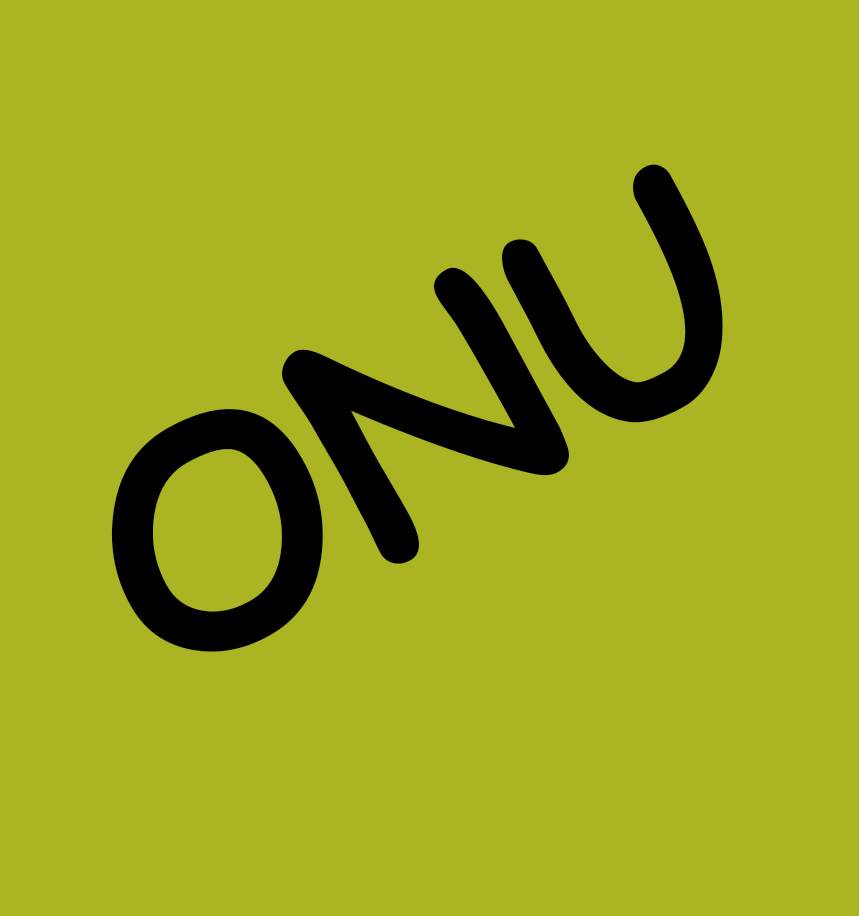
<style>
.page{position:relative;width:859px;height:916px;background:#abb423}
.page>*{position:absolute;margin:0}
.t1{font:300px "ComicSansMS-Bold";color:#000000;font-variant:small-caps}
</style>
<div class="page">
<p class="t1" style="left:111px;top:164px;width:612px;height:488px;rotate:-29deg">ONU</p>
</div>
